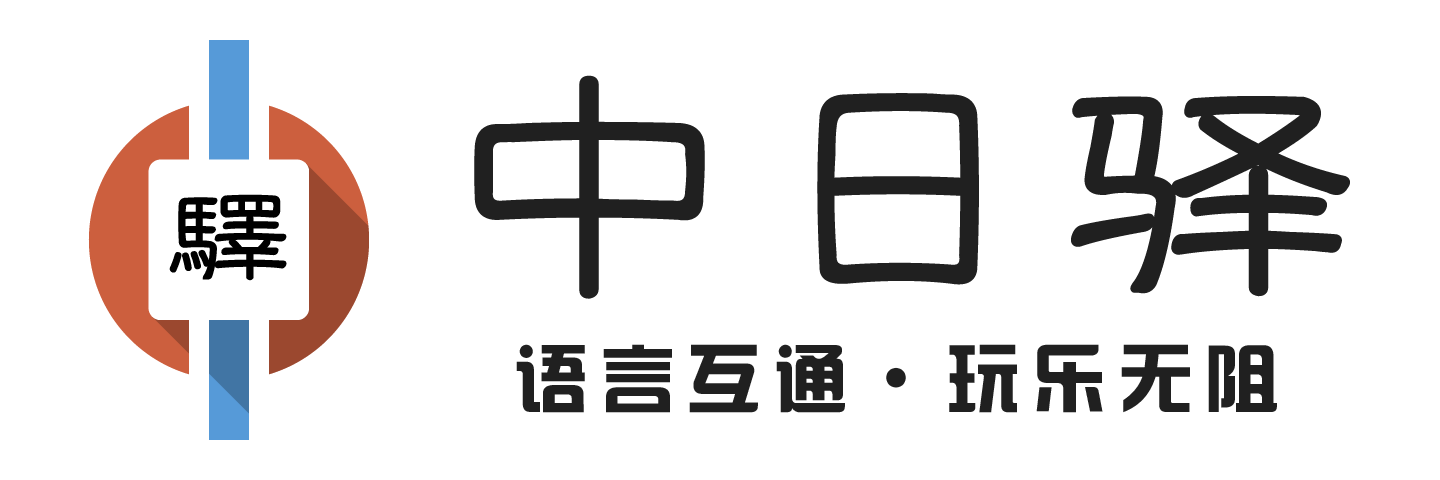
<style>
.page{position:relative;width:1440px;height:480px;background:#ffffff}
.page>*{position:absolute;margin:0}
.t1{font:288px "FZTJLSK--GBK1-0";letter-spacing:0.05em;color:#202020;font-weight:bold}
.t2{font:72px "FZHZGBJW--GB1-0";letter-spacing:0.2em;color:#202020}
</style>
<div class="page">
<p class="t1" style="left:474px;top:75px;width:876px;height:224px">中日驿</p>
<p class="t2" style="left:516px;top:344px;width:761px;height:69px">语言互通·玩乐无阻</p>
</div>
